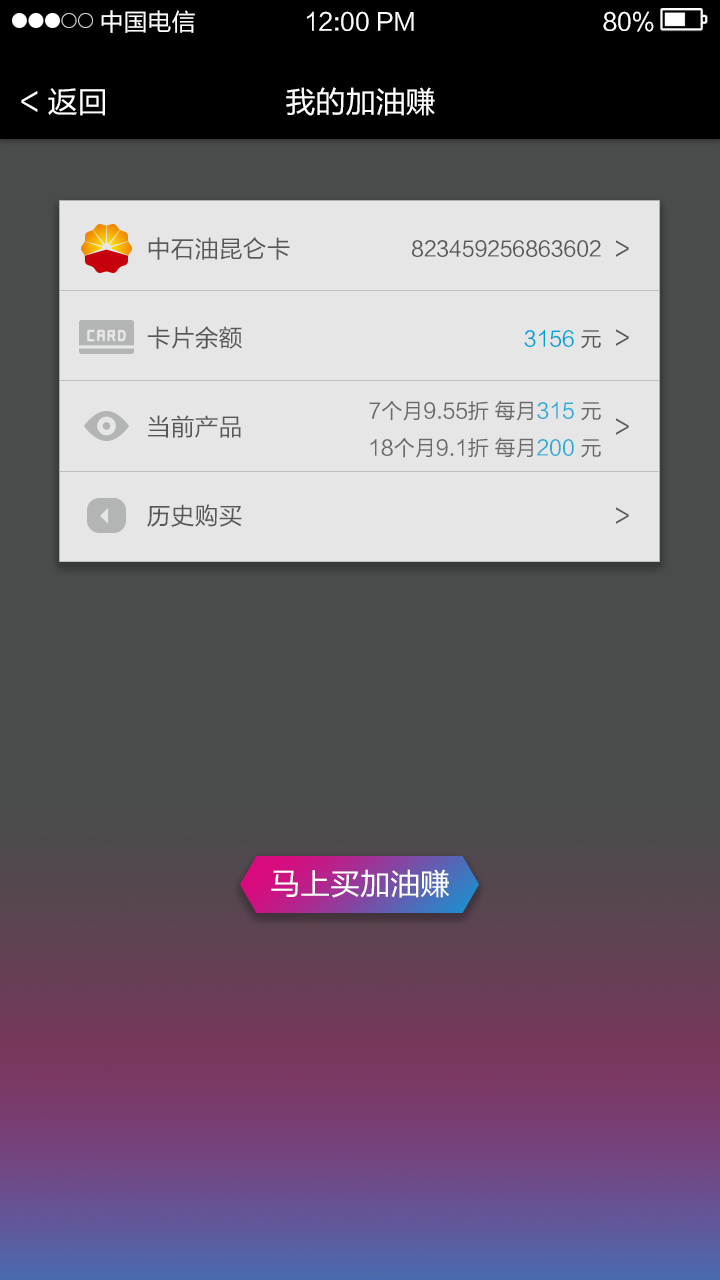
<style>
.page{position:relative;width:720px;height:1280px;background:#4a4c4b}
.page>*{position:absolute;margin:0}
.t1{font:24px "FZLTHK--GBK1-0";color:#ffffff}
.t2{font:30px "FZLTHK--GBK1-0";color:#ffffff}
.t3{font:24px/89px "FZLTHK--GBK1-0";color:#595757}
.t4{font:21px "FZLTHK--GBK1-0";color:#595757}
.t5{font:21px "FZLTHK--GBK1-0";color:#00a3db}
</style>
<div class="page">
<p class="t1" style="left:101px;top:10px;width:94px;height:23px">中国电信</p>
<p class="t1" style="left:307px;top:11px;width:107px;height:20px">12:00 PM</p>
<p class="t1" style="left:603px;top:11px;width:51px;height:21px">80%</p>
<p class="t2" style="left:21px;top:88px;width:84px;height:28px">&lt; 返回</p>
<p class="t2" style="left:286px;top:87px;width:149px;height:29px">我的加油赚</p>
<p class="t3" style="left:147px;top:237px;width:482px;height:290px">中石油昆仑卡         &gt;<br>卡片余额           &gt;<br>当前产品           &gt;<br>历史购买           &gt;</p>
<p class="t4" style="left:412px;top:240px;width:189px;height:17px">823459256863602</p>
<p class="t5" style="left:524px;top:330px;width:77px;height:19px">3156<span class="t4"> 元</span></p>
<p class="t4" style="left:369px;top:400px;width:232px;height:58px;text-align:right;opacity:0.9">7个月9.55折 每月<span class="t5">315</span> 元<br>18个月9.1折 每月<span class="t5">200</span> 元</p>
<p class="t2" style="left:271px;top:869px;width:178px;height:29px">马上买加油赚</p>
</div>
